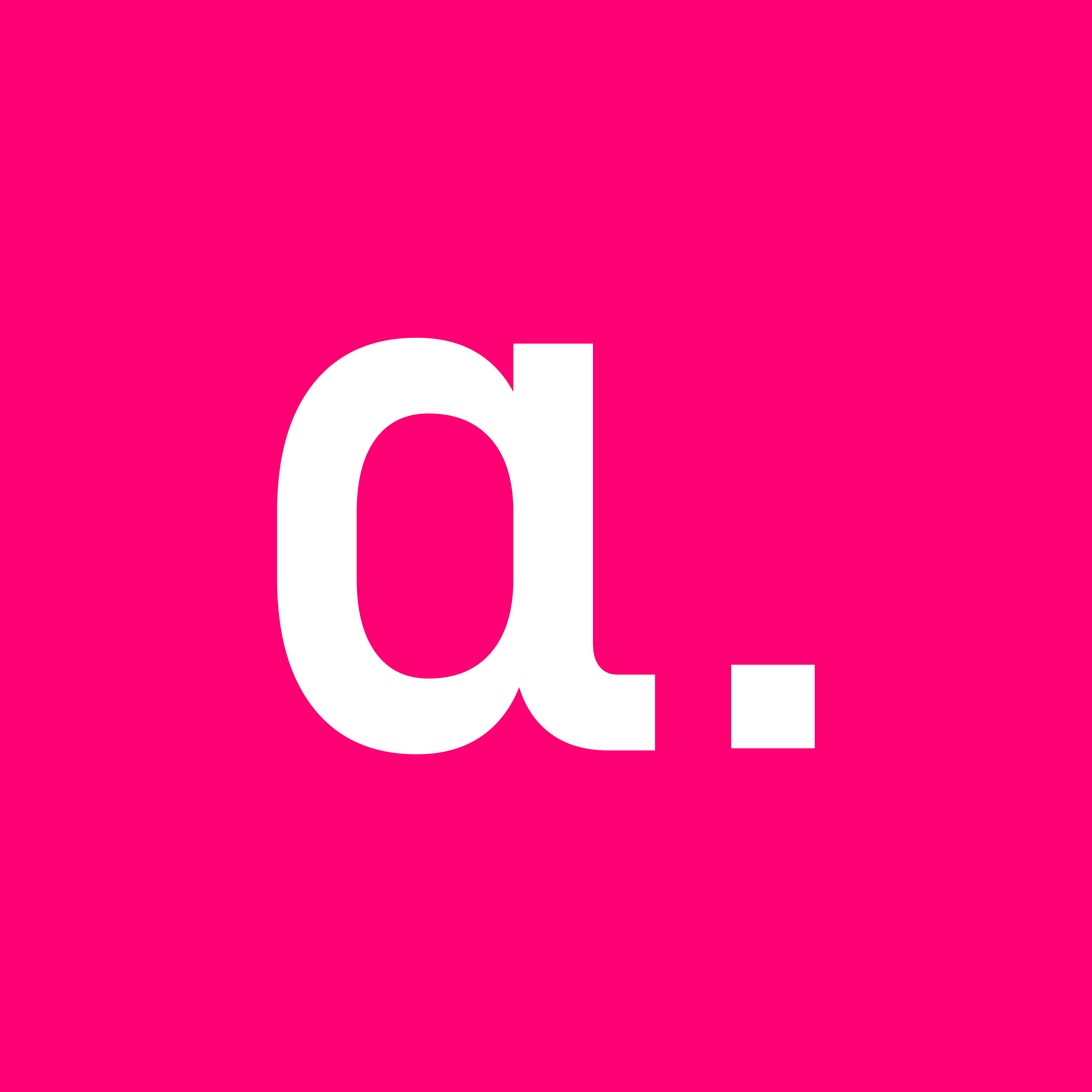
<style>
.page{position:relative;width:1092px;height:1092px;background:#fd0073}
.page>*{position:absolute;margin:0}
.t1{font:798.6px "Bahnschrift";color:#ffffff}
</style>
<div class="page">
<p class="t1" style="left:277px;top:337px;width:538px;height:418px">α.</p>
</div>
